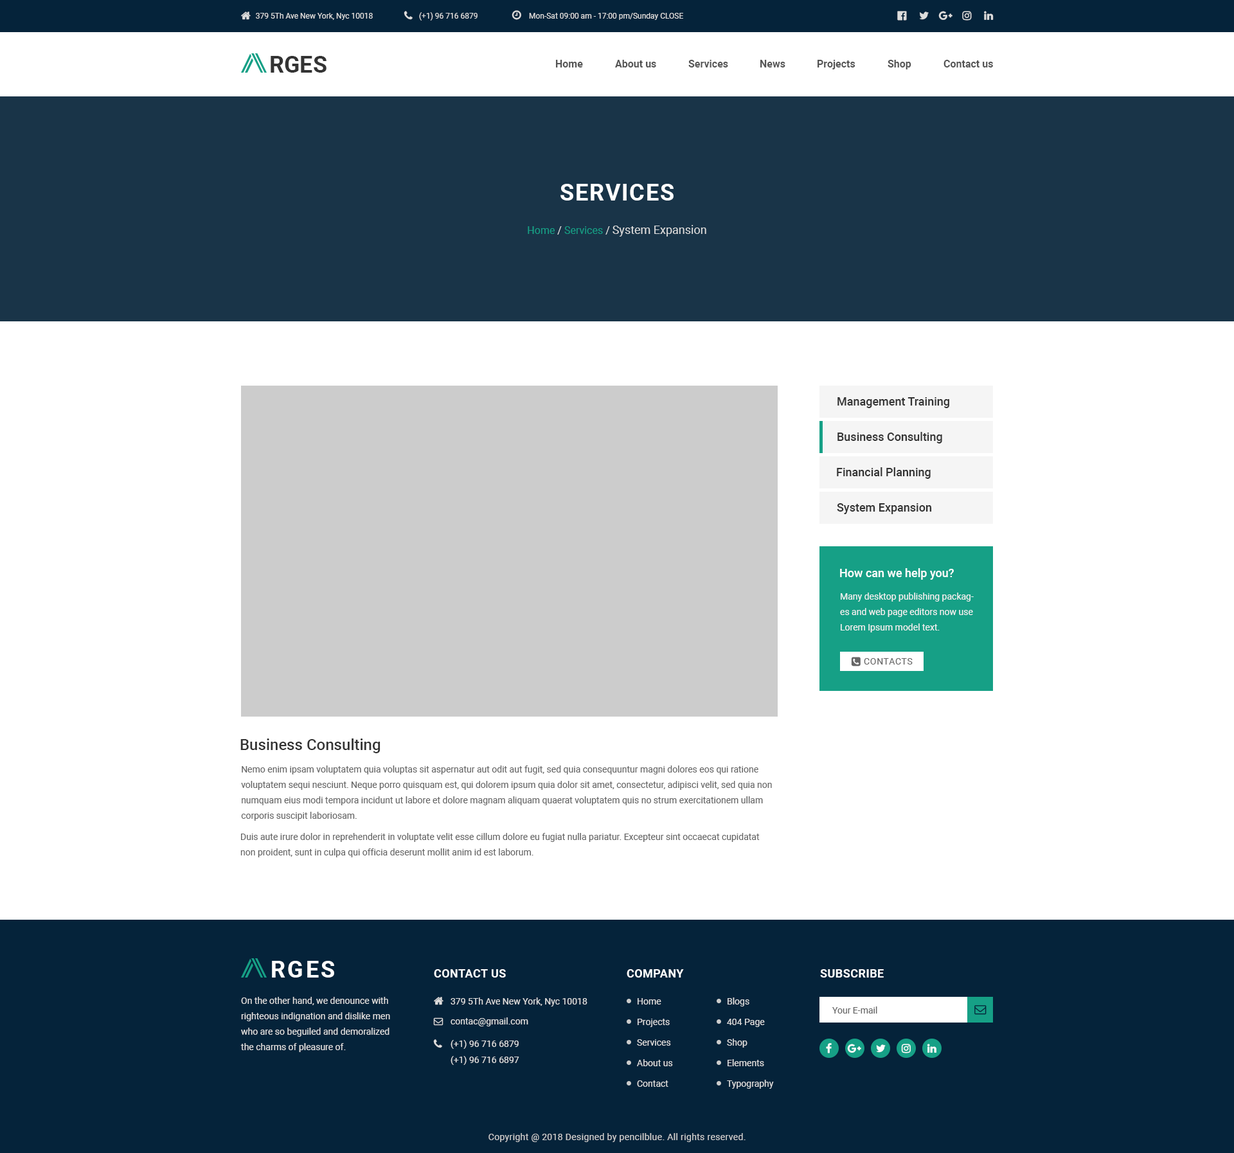
<style>
.page{position:relative;width:1234px;height:1153px;background:#ffffff}
.page>*{position:absolute;margin:0}
.t1{font:7.7px "Roboto-Regular";color:#dddddd}
.t2{font:7.7px "Roboto-Regular";color:#dddddd;text-transform:uppercase}
.t3{font:23.1px "Roboto-Bold";color:#333333}
.t4{font:23.1px "Roboto-Bold";color:#333333;text-transform:uppercase}
.t5{font:10.3px "Roboto-Bold";color:#555555}
.t6{font:23.1px "Roboto-Bold";letter-spacing:0.05em;color:#ffffff;text-transform:uppercase}
.t7{font:11.6px "Roboto-Regular";color:#dddddd}
.t8{font:10.3px "Roboto-Regular";color:#16a086}
.t9{font:10.3px "Roboto-Regular";color:#dddddd}
.t10{font:11.6px "Roboto-Medium";color:#333333}
.t11{font:11.6px "Roboto-Medium";color:#ffffff}
.t12{font:9px/15.4px "Roboto-Regular";color:#f2f2f2}
.t13{font:9px "Roboto-Regular";letter-spacing:0.05em;color:#666666;text-transform:uppercase}
.t14{font:15.4px "Roboto-Medium";color:#333333}
.t15{font:9px/15.4px "Roboto-Regular";color:#666666}
.t16{font:23.1px "Roboto-Bold";letter-spacing:0.1em;color:#ffffff}
.t17{font:23.1px "MyriadPro-Bold";letter-spacing:0.1em;color:#333333;text-transform:uppercase}
.t18{font:11.6px "Roboto-Bold";letter-spacing:0.025em;color:#ffffff;text-transform:uppercase}
.t19{font:9px/15.4px "Roboto-Regular";color:#dddddd}
.t20{font:9px "Roboto-Regular";color:#dddddd}
.t21{font:9px "Roboto-Regular";color:#666666}
.t22{font:9px "Roboto-Regular";letter-spacing:0.025em;color:#cccccc}
</style>
<div class="page">
<p class="t1" style="left:256px;top:13px;width:117px;height:7px">379 5Th Ave New York, Nyc 10018</p>
<p class="t1" style="left:419px;top:12px;width:59px;height:9px">(+1) 96 716 6879</p>
<p class="t1" style="left:529px;top:13px;width:154px;height:7px">Mon-Sat 09:00 am - 17:00 pm/Sunday <span class="t2">Close</span></p>
<p class="t3" style="left:271px;top:56px;width:56px;height:17px"><span class="t4"> </span>RGES</p>
<p class="t5" style="left:556px;top:60px;width:27px;height:8px">Home</p>
<p class="t5" style="left:615px;top:60px;width:41px;height:8px">About us</p>
<p class="t5" style="left:688px;top:60px;width:40px;height:8px">Services</p>
<p class="t5" style="left:760px;top:60px;width:26px;height:8px">News</p>
<p class="t5" style="left:818px;top:60px;width:38px;height:9px">Projects</p>
<p class="t5" style="left:888px;top:60px;width:24px;height:9px">Shop</p>
<p class="t5" style="left:944px;top:60px;width:49px;height:8px">Contact us</p>
<p class="t6" style="left:561px;top:184px;width:113px;height:17px">Services</p>
<p class="t7" style="left:528px;top:225px;width:178px;height:12px"><span class="t8">Home </span><span class="t9">/</span><span class="t8"> Services </span><span class="t9">/ </span>System Expansion</p>
<p class="t10" style="left:838px;top:397px;width:112px;height:11px">Management Training</p>
<p class="t10" style="left:838px;top:432px;width:104px;height:12px">Business Consulting</p>
<p class="t10" style="left:837px;top:467px;width:94px;height:12px">Financial Planning</p>
<p class="t10" style="left:837px;top:503px;width:95px;height:11px">System Expansion</p>
<p class="t11" style="left:840px;top:568px;width:114px;height:12px">How can we help you?</p>
<p class="t12" style="left:840px;top:593px;width:134px;height:40px">Many desktop publishing packages and web page editors now use Lorem Ipsum model text.</p>
<p class="t13" style="left:864px;top:658px;width:49px;height:7px">Contacts</p>
<p class="t14" style="left:240px;top:739px;width:141px;height:14px">Business Consulting</p>
<p class="t15" style="left:241px;top:766px;width:531px;height:55px">Nemo enim ipsam voluptatem quia voluptas sit aspernatur aut odit aut fugit, sed quia consequuntur magni dolores eos qui ratione voluptatem sequi nesciunt. Neque porro quisquam est, qui dolorem ipsum quia dolor sit amet, consectetur, adipisci velit, sed quia non numquam eius modi tempora incidunt ut labore et dolore magnam aliquam quaerat voluptatem quis no strum exercitationem ullam corporis suscipit laboriosam.</p>
<p class="t15" style="left:240px;top:833px;width:520px;height:25px">Duis aute irure dolor in reprehenderit in voluptate velit esse cillum dolore eu fugiat nulla pariatur. Excepteur sint occaecat cupidatat non proident, sunt in culpa qui officia deserunt mollit anim id est laborum.</p>
<p class="t16" style="left:272px;top:961px;width:62px;height:17px"><span class="t17"> </span>RGES</p>
<p class="t18" style="left:434px;top:969px;width:72px;height:9px">Contact us</p>
<p class="t18" style="left:627px;top:969px;width:57px;height:9px">Company</p>
<p class="t18" style="left:820px;top:969px;width:64px;height:9px">subscribe</p>
<p class="t19" style="left:240px;top:997px;width:150px;height:55px">On the other hand, we denounce with righteous indignation and dislike men who are so beguiled and demoralized   the charms of pleasure of.</p>
<p class="t20" style="left:451px;top:998px;width:137px;height:9px">379 5Th Ave New York, Nyc 10018</p>
<p class="t20" style="left:638px;top:998px;width:24px;height:7px">Home</p>
<p class="t20" style="left:728px;top:998px;width:22px;height:9px">Blogs</p>
<p class="t21" style="left:833px;top:1007px;width:45px;height:7px">Your E-mail</p>
<p class="t20" style="left:451px;top:1018px;width:77px;height:9px">contac@gmail.com</p>
<p class="t20" style="left:638px;top:1019px;width:32px;height:8px">Projects</p>
<p class="t20" style="left:727px;top:1019px;width:38px;height:8px">404 Page</p>
<p class="t20" style="left:451px;top:1040px;width:68px;height:9px">(+1) 96 716 6879</p>
<p class="t20" style="left:637px;top:1040px;width:34px;height:6px">Services</p>
<p class="t20" style="left:727px;top:1039px;width:21px;height:9px">Shop</p>
<p class="t20" style="left:451px;top:1056px;width:68px;height:9px">(+1) 96 716 6897</p>
<p class="t20" style="left:637px;top:1059px;width:36px;height:7px">About us</p>
<p class="t20" style="left:728px;top:1059px;width:36px;height:7px">Elements</p>
<p class="t20" style="left:637px;top:1081px;width:32px;height:6px">Contact</p>
<p class="t20" style="left:727px;top:1080px;width:47px;height:9px">Typography</p>
<p class="t22" style="left:489px;top:1133px;width:257px;height:9px">Copyright @ 2018 Designed by pencilblue. All rights reserved.</p>
</div>
